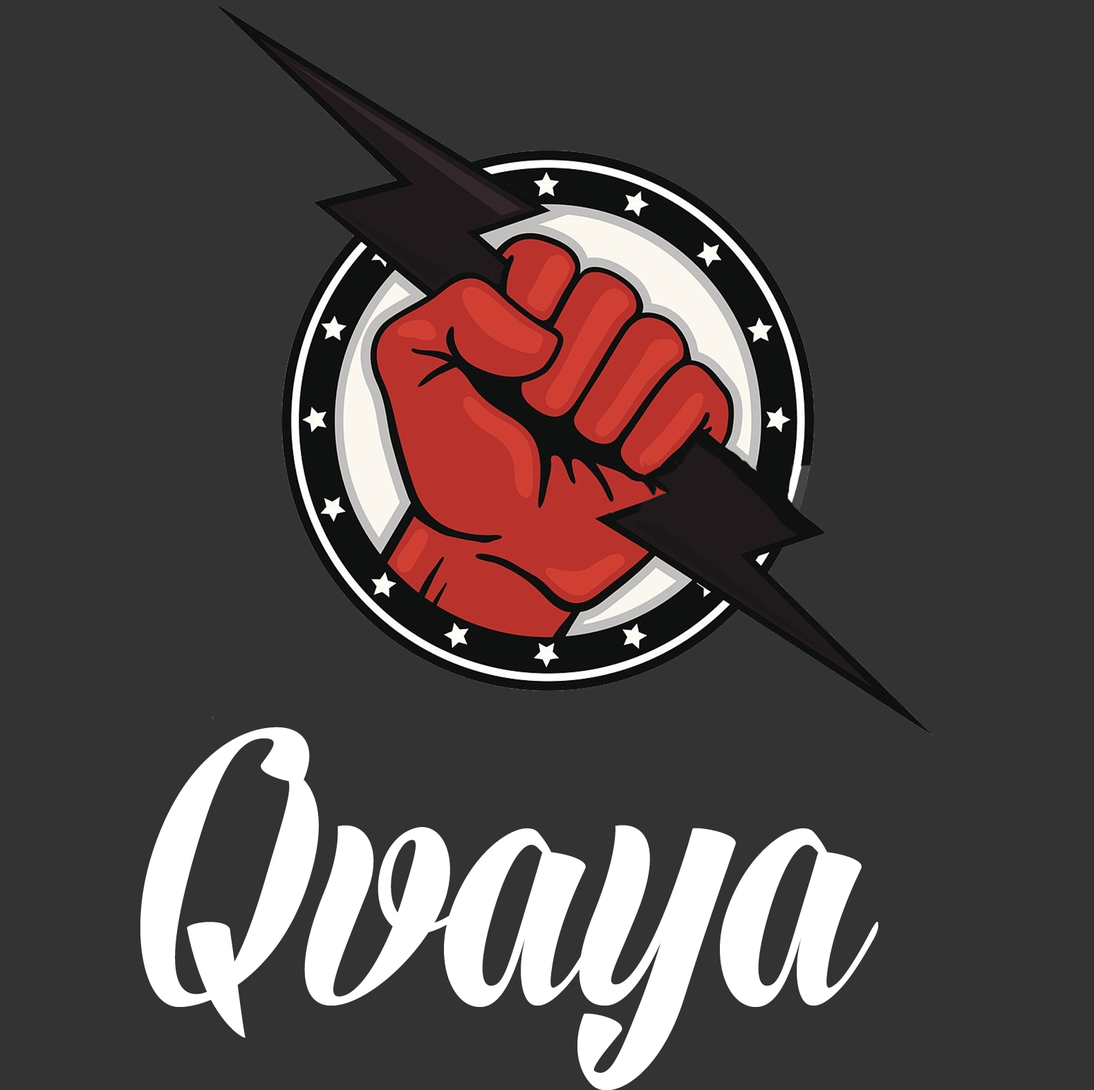
<style>
.page{position:relative;width:1094px;height:1090px;background:#333333}
.page>*{position:absolute;margin:0}
.t1{font:345.9px "BonbonRegular";color:#ffffff}
</style>
<div class="page">
<p class="t1" style="left:140px;top:726px;width:739px;height:364px">Qvaya</p>
</div>
